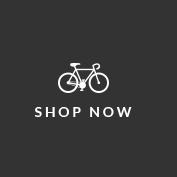
<style>
.page{position:relative;width:177px;height:177px;background:#333333}
.page>*{position:absolute;margin:0}
.t1{font:14px "Lato-Bold";letter-spacing:0.2em;color:#ffffff;text-transform:uppercase}
</style>
<div class="page">
<p class="t1" style="left:34px;top:107px;width:98px;height:10px">Shop now</p>
</div>
